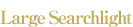
<style>
.page{position:relative;width:133px;height:27px;background:#ffffff}
.page>*{position:absolute;margin:0}
.t1{font:18px "RyuminPro-ExBold";letter-spacing:-0.08em;color:#c4a956}
</style>
<div class="page">
<p class="t1" style="left:0px;top:10px;width:132px;height:17px">Large Searchlight</p>
</div>
